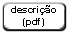
<style>
.page{position:relative;width:70px;height:34px;background:#ffffff}
.page>*{position:absolute;margin:0}
.t1{font:9.7px "Arial-BoldMT";color:#000000}
</style>
<div class="page">
<p class="t1" style="left:11px;top:5px;width:45px;height:22px;text-align:center">descrição<br>(pdf)</p>
</div>
